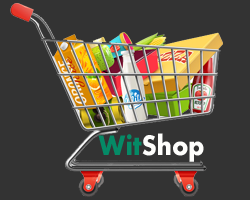
<style>
.page{position:relative;width:250px;height:200px;background:#333333}
.page>*{position:absolute;margin:0}
.t1{font:29.2px "Aharoni-Bold";color:#fefefc;scale:0.9 1}
.t2{font:29.2px "Aharoni-Bold";color:#058a66;scale:0.9 1}
</style>
<div class="page">
<p class="t1" style="left:98px;top:133px;width:106px;height:29px"><span class="t2">Wit</span>Shop</p>
</div>
